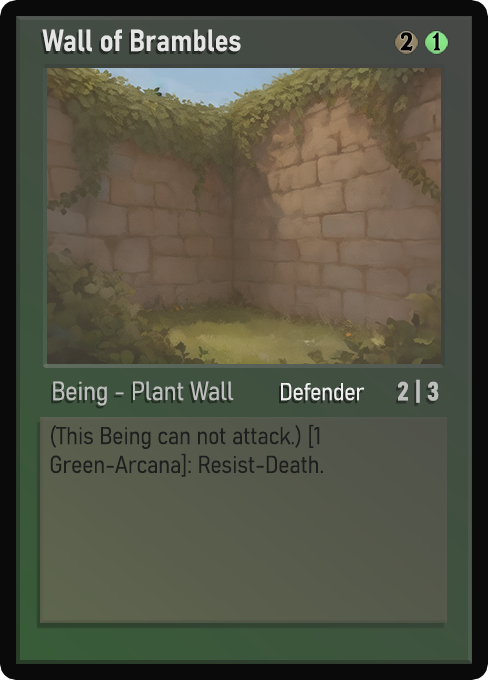
<style>
.page{position:relative;width:488px;height:680px}
.page>*{position:absolute;margin:0}
.t1{font:30px "Bahnschrift-SemiBoldSemiCondensed";color:#f2f2f2;font-weight:bold}
.t2{font:25px "WTRRoycroft";color:#000000;font-weight:bold;scale:1.09 1}
.t3{font:26px "Bahnschrift-LightSemiCondensed";color:#c8c8c8;font-weight:bold}
.t4{font:24px "Bahnschrift-LightSemiCondensed";color:#f0efef;font-weight:bold}
.t5{font:26px "Bahnschrift-BoldSemiCondensed";color:#bdbfbd;font-weight:bold}
.t6{font:24px "Bahnschrift-LightSemiCondensed";color:#1e1e1e;font-weight:bold}
</style>
<div class="page">
<p class="t1" style="left:42px;top:29px;width:199px;height:23px;opacity:0.9">Wall of Brambles</p>
<p class="t2" style="left:400px;top:32px;width:13px;height:19px">2</p>
<p class="t2" style="left:432px;top:32px;width:9px;height:19px">1</p>
<p class="t3" style="left:53px;top:381px;width:181px;height:25px;opacity:0.9">Being - Plant Wall</p>
<p class="t4" style="left:281px;top:383px;width:84px;height:18px">Defender</p>
<p class="t5" style="left:398px;top:379px;width:41px;height:24px">2 | 3</p>
<p class="t6" style="left:50px;top:424px;width:273px;height:53px">(This Being can not attack.) [1 Green-Arcana]: Resist-Death.</p>
</div>
